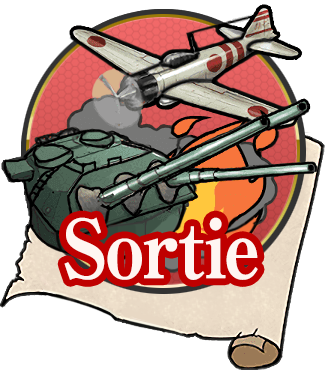
<style>
.page{position:relative;width:325px;height:370px;background:#ffffff}
.page>*{position:absolute;margin:0}
.t1{font:80px "RyuminPro-ExBold";letter-spacing:-0.04em;color:#fff6f2;font-weight:bold;scale:0.9 1}
</style>
<div class="page">
<p class="t1" style="left:64px;top:217px;width:194px;height:63px">Sortie</p>
</div>
